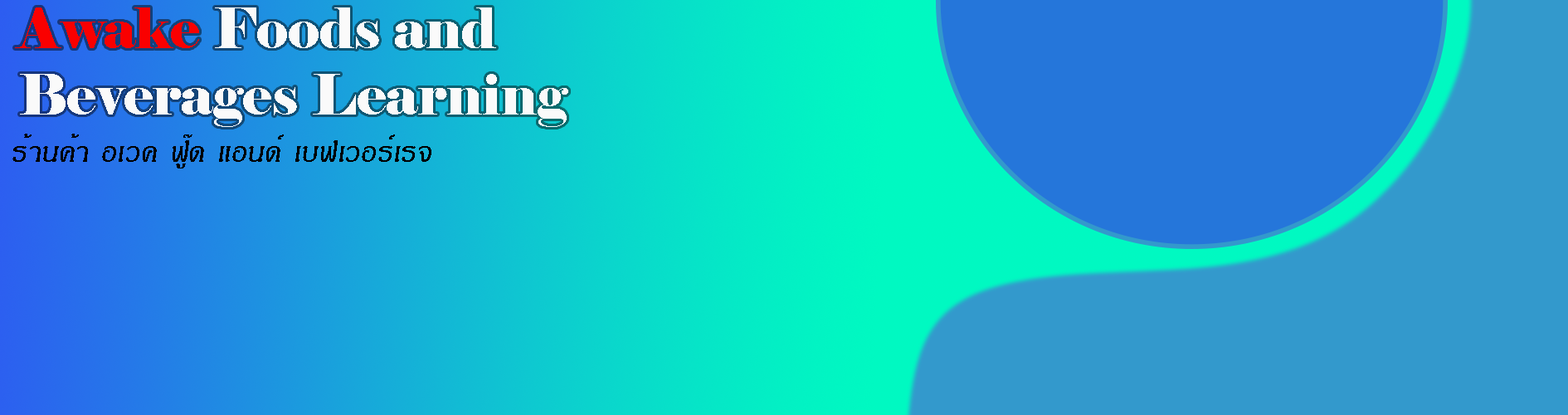
<style>
.page{position:relative;width:1568px;height:415px;background:#3399cc}
.page>*{position:absolute;margin:0}
.t1{font:55.2px "Elephant-Regular";color:#fafafa}
.t2{font:55.2px "Elephant-Regular";color:#fa0000}
.t3{font:39.8px "JSPrapakorn-Italic";color:#000000}
</style>
<div class="page">
<p class="t1" style="left:15px;top:7px;width:553px;height:120px"><span class="t2">Awake </span>Foods and <br>Beverages Learning</p>
<p class="t3" style="left:12px;top:134px;width:419px;height:34px">ร้านค้า อเวค ฟู๊ด แอนด์ เบฟเวอร์เรจ</p>
</div>
